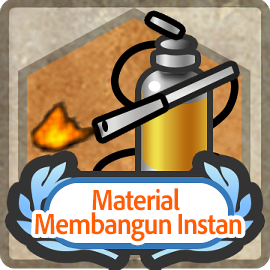
<style>
.page{position:relative;width:270px;height:270px}
.page>*{position:absolute;margin:0}
.t1{font:30px/24px "AdobeClean-Bold";letter-spacing:-0.04em;color:#ff5d00;scale:0.9 1}
</style>
<div class="page">
<p class="t1" style="left:35px;top:188px;width:207px;height:54px;text-align:center">Material <br>Membangun Instan</p>
</div>
